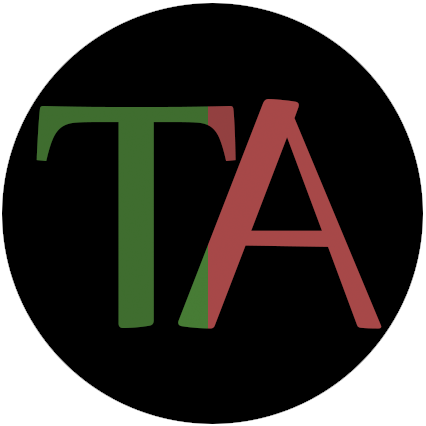
<style>
.page{position:relative;width:426px;height:426px;background:#000000}
.page>*{position:absolute;margin:0}
.t1{font:387.1px "Nyala-Regular";color:#a74848}
.t2{font:386.6px "Nyala-Regular";color:#3f6d2f}
</style>
<div class="page">
<p class="t1" style="left:178px;top:99px;width:204px;height:230px;rotate:180deg">A</p>
<p class="t2" style="left:36px;top:106px;width:200px;height:222px">T</p>
</div>
